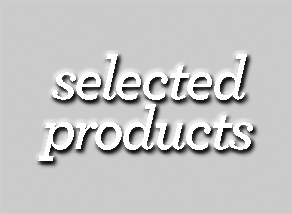
<style>
.page{position:relative;width:292px;height:214px;background:#cbcbcb}
.page>*{position:absolute;margin:0}
.t1{font:61.1px/50px "Archer-SemiboldItalic";letter-spacing:-0.05em;color:#ffffff}
</style>
<div class="page">
<p class="t1" style="left:38px;top:54px;width:215px;height:107px;text-align:center">selected<br>products</p>
</div>
